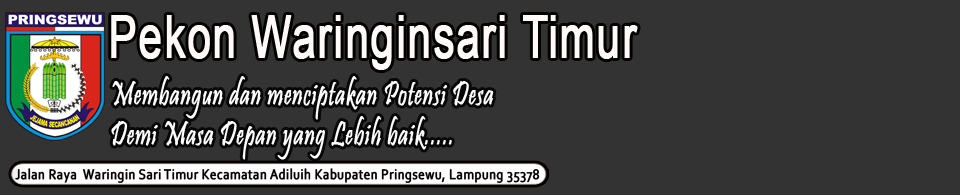
<style>
.page{position:relative;width:960px;height:195px;background:#333333}
.page>*{position:absolute;margin:0}
.t1{font:58.1px "ArialMT";letter-spacing:0.025em;color:#ffffff;font-weight:bold;scale:0.72 1}
.t2{font:33.8px "Pristina-Regular";letter-spacing:0.025em;color:#ffffff;font-weight:bold;scale:0.7 1}
.t3{font:14.8px "Corbel";letter-spacing:0.025em;color:#050000;font-weight:bold;scale:0.86 1}
</style>
<div class="page">
<p class="t1" style="left:111px;top:15px;width:527px;height:55px">Pekon Waringinsari Timur</p>
<p class="t2" style="left:111px;top:76px;width:383px;height:84px">Membangun dan menciptakan Potensi Desa<br>Demi Masa Depan yang Lebih baik.....</p>
<p class="t3" style="left:15px;top:168px;width:525px;height:15px">Jalan Raya  Waringin Sari Timur Kecamatan Adiluih Kabupaten Pringsewu, Lampung 35378</p>
</div>
